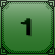
<style>
.page{position:relative;width:55px;height:55px}
.page>*{position:absolute;margin:0}
.t1{font:24px "Fixedsys";color:#000000}
</style>
<div class="page">
<p class="t1" style="left:20px;top:18px;width:10px;height:18px">1</p>
</div>
